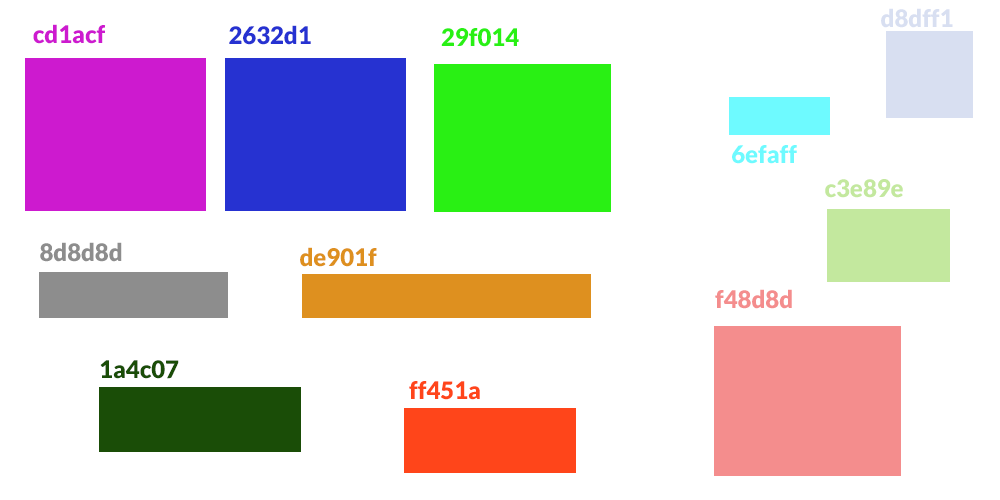
<style>
.page{position:relative;width:1000px;height:500px;background:#ffffff}
.page>*{position:absolute;margin:0}
.t1{font:23.9px "Lato-Black";color:#d8dff1}
.t2{font:23.9px "Lato-Black";color:#cd1acf}
.t3{font:23.9px "Lato-Black";color:#2632d1}
.t4{font:23.9px "Lato-Black";color:#29f014}
.t5{font:23.9px "Lato-Black";color:#6efaff}
.t6{font:23.9px "Lato-Black";color:#c3e89e}
.t7{font:23.9px "Lato-Black";color:#8d8d8d}
.t8{font:23.9px "Lato-Black";color:#de901f}
.t9{font:23.9px "Lato-Black";color:#f48d8d}
.t10{font:23.9px "Lato-Black";color:#1a4d07}
.t11{font:23.9px "Lato-Black";color:#ff451a}
</style>
<div class="page">
<p class="t1" style="left:881px;top:8px;width:72px;height:20px">d8dff1</p>
<p class="t2" style="left:33px;top:24px;width:73px;height:20px">cd1acf</p>
<p class="t3" style="left:229px;top:25px;width:82px;height:20px">2632d1</p>
<p class="t4" style="left:441px;top:28px;width:78px;height:19px">29f014</p>
<p class="t5" style="left:732px;top:145px;width:65px;height:19px">6efaff</p>
<p class="t6" style="left:825px;top:179px;width:78px;height:19px">c3e89e</p>
<p class="t7" style="left:40px;top:242px;width:82px;height:20px">8d8d8d</p>
<p class="t8" style="left:300px;top:247px;width:77px;height:20px">de901f</p>
<p class="t9" style="left:715px;top:289px;width:77px;height:20px">f48d8d</p>
<p class="t10" style="left:100px;top:360px;width:79px;height:19px">1a4c07</p>
<p class="t11" style="left:409px;top:381px;width:71px;height:19px">ff451a</p>
</div>
